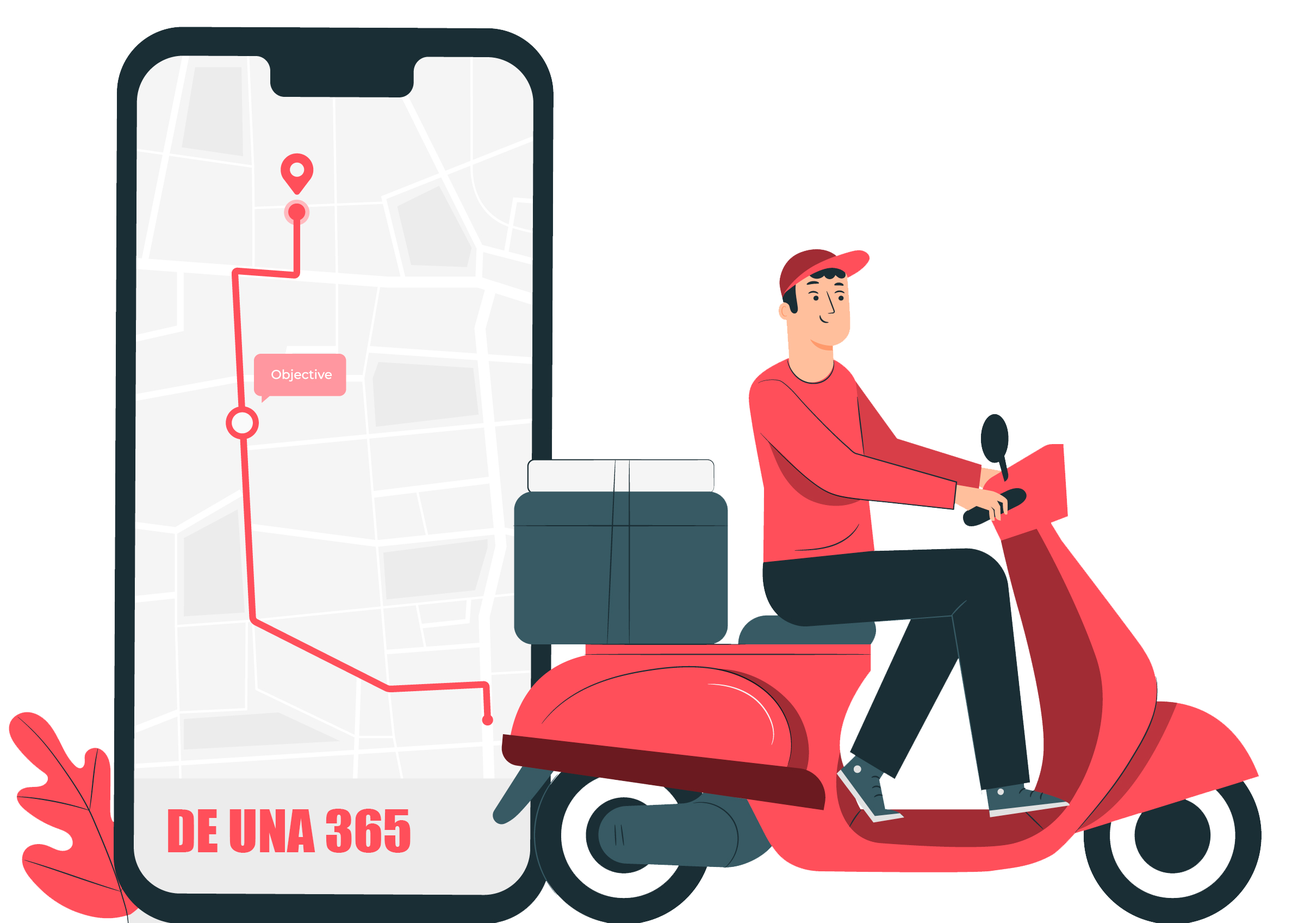
<style>
.page{position:relative;width:1292px;height:923px;background:#ffffff}
.page>*{position:absolute;margin:0}
.t1{font:54.4px "Impact";color:#ff4f5a}
</style>
<div class="page">
<p class="t1" style="left:168px;top:808px;width:243px;height:44px">DE UNA 365</p>
</div>
